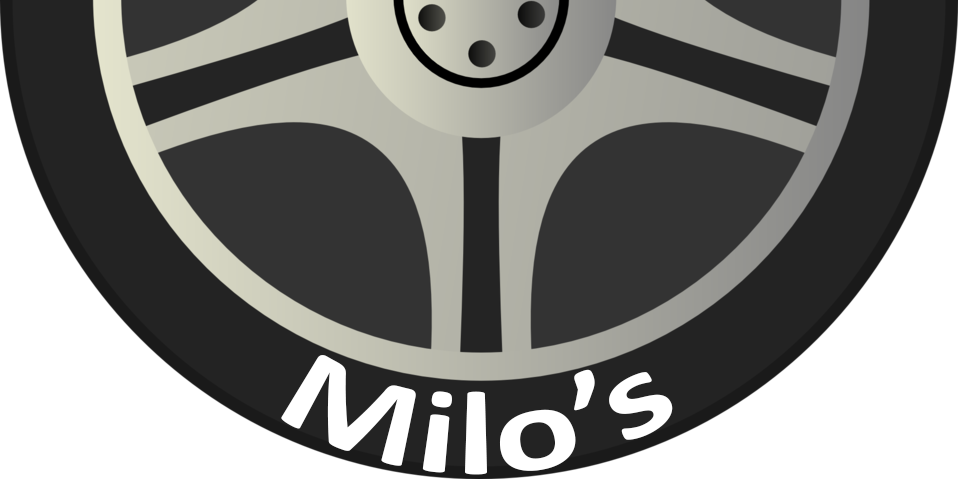
<style>
.page{position:relative;width:958px;height:479px;background:#ffffff}
.page>*{position:absolute;margin:0}
.t1{font:122px "Calibri-Bold";color:#ffffff}
</style>
<div class="page">
<p class="t1" style="left:281px;top:355px;width:392px;height:120px">Milo’s</p>
</div>
